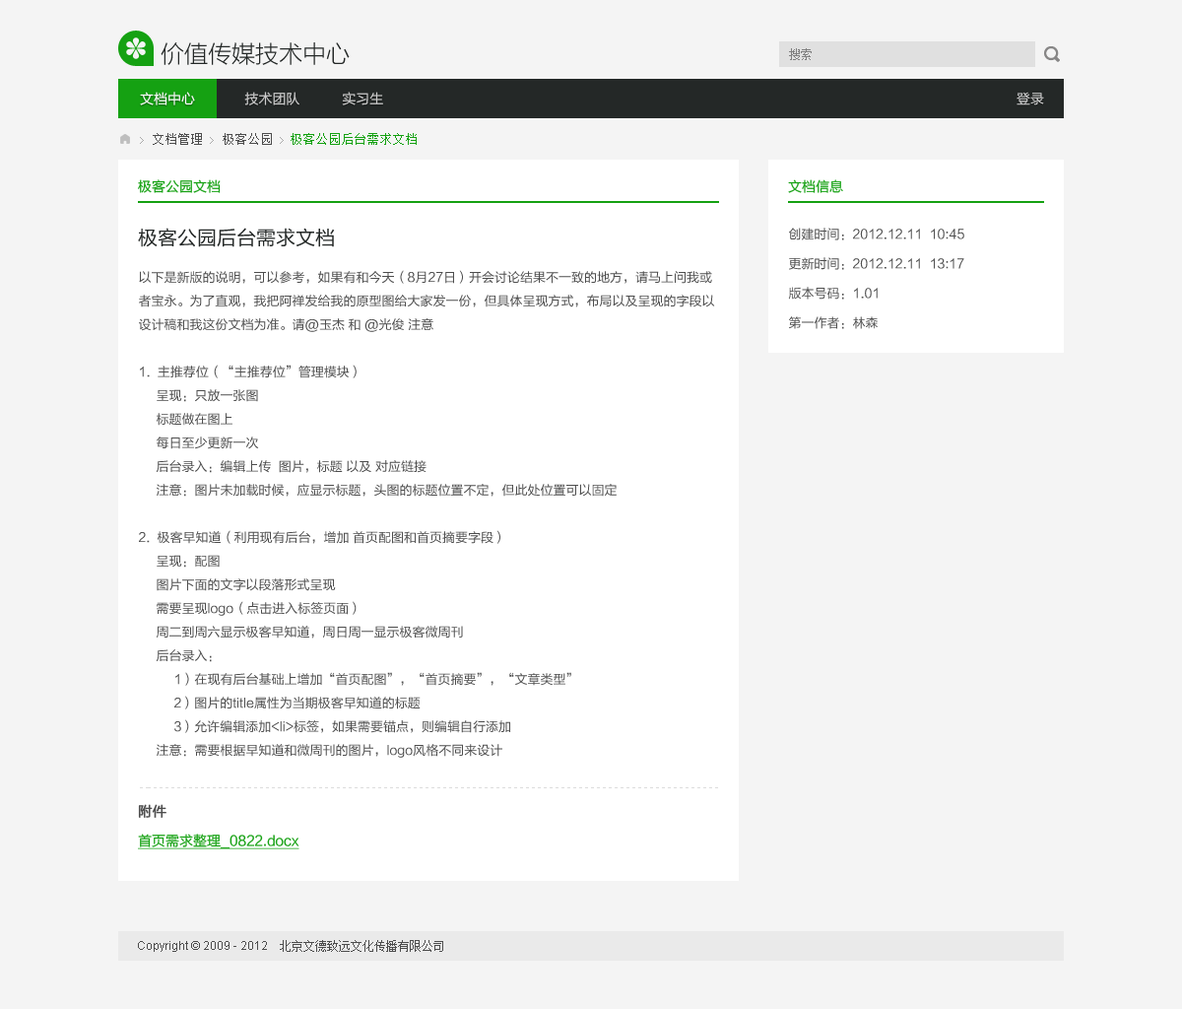
<style>
.page{position:relative;width:1182px;height:1009px;background:#f4f4f4}
.page>*{position:absolute;margin:0}
.t1{font:23.6px "FZLTXHK--GBK1-0";color:#242827}
.t2{font:11.8px "SimSun";color:#7f7f7f}
.t3{font:13.8px "FZLTHJW--GB1-0";color:#cccccc}
.t4{font:13.8px "FZLTHJW--GB1-0";color:#ffffff}
.t5{font:13.8px "FZLTHJW--GB1-0";color:#dddddd}
.t6{font:12.8px "SimSun";color:#15a112}
.t7{font:12.8px "SimSun";color:#4d4d4d}
.t8{font:9.9px "SimSun";color:#aaaaaa}
.t9{font:13.8px "FZLTHJW--GB1-0";color:#15a112}
.t10{font:19.7px "FZLTHJW--GB1-0";color:#242827}
.t11{font:12.8px/29.6px "FZLTHJW--GB1-0";color:#4d4d4d}
.t12{font:12.8px/23.6px "FZLTHJW--GB1-0";color:#4d4d4d}
.t13{font:13.8px/29.6px "FZLTHJW--GB1-0";color:#15a112;text-decoration:underline}
.t14{font:13.8px/29.6px "FZLTHJW--GB1-0";color:#4d4d4d;font-weight:bold}
.t15{font:11.8px "ArialMT";color:#4d4d4d}
.t16{font:11.8px "SimSun";color:#4d4d4d}
</style>
<div class="page">
<p class="t1" style="left:161px;top:42px;width:189px;height:23px">价值传媒技术中心</p>
<p class="t2" style="left:789px;top:48px;width:23px;height:12px">搜索</p>
<p class="t3" style="left:140px;top:92px;width:243px;height:13px"><span class="t4">文档中心             </span>技术团队           实习生</p>
<p class="t5" style="left:1017px;top:92px;width:27px;height:13px">登录</p>
<p class="t6" style="left:140px;top:133px;width:277px;height:12px"><span class="t7"> </span><span class="t8">&gt;</span><span class="t7"> 文档管理 </span><span class="t8">&gt;</span><span class="t7"> 极客公园 </span><span class="t8">&gt; </span>极客公园后台需求文档</p>
<p class="t9" style="left:138px;top:179px;width:83px;height:14px">极客公园文档</p>
<p class="t9" style="left:788px;top:179px;width:55px;height:14px">文档信息</p>
<p class="t10" style="left:138px;top:228px;width:197px;height:19px">极客公园后台需求文档</p>
<p class="t11" style="left:788px;top:228px;width:176px;height:101px">创建时间：2012.12.11  10:45<br>更新时间：2012.12.11  13:17<br>版本号码：1.01<br>第一作者：林森</p>
<p class="t12" style="left:139px;top:270px;width:576px;height:488px">以下是新版的说明，可以参考，如果有和今天（8月27日）开会讨论结果不一致的地方，请马上问我或者宝永。为了直观，我把阿禅发给我的原型图给大家发一份，但具体呈现方式，布局以及呈现的字段以设计稿和我这份文档为准。请@玉杰 和 @光俊 注意<br><br>1.  主推荐位（“主推荐位”管理模块）<br>     呈现：只放一张图<br>     标题做在图上<br>     每日至少更新一次<br>     后台录入：编辑上传  图片，标题 以及 对应链接<br>     注意：图片未加载时候，应显示标题，头图的标题位置不定，但此处位置可以固定<br> <br>2.  极客早知道（利用现有后台，增加 首页配图和首页摘要字段）<br>     呈现：配图<br>     图片下面的文字以段落形式呈现<br>     需要呈现logo（点击进入标签页面）<br>     周二到周六显示极客早知道，周日周一显示极客微周刊<br>     后台录入：<br> 1）在现有后台基础上增加“首页配图”，“首页摘要”，“文章类型”<br> 2）图片的title属性为当期极客早知道的标题<br> 3）允许编辑添加&lt;li&gt;标签，如果需要锚点，则编辑自行添加<br>     注意：需要根据早知道和微周刊的图片，logo风格不同来设计<br> <br>3.       中期推荐位（“中期推荐”管理模块）<br>呈现：1）共12个，每次显示4个，该区域内容和主推荐区无关<br>2）编辑能控制顺序，更新频率不定<br>3）每次点击，更换四个（不点击就不更换），到最后一张图片不能继续往后点<br>后台录入：编辑上传图片，标题（作为图片的title值）以及链接，并通过拖拽调整顺序<br> <br>4.       极客观察（利用现有后台）<br>呈现：1）“极客观察”旁边用一句话描述产品定位<br>2）每篇文章均显示标题，作者，日期，最新2-4篇文章加摘要，共6-10个（以设计稿为准），不读极客早知道和微周刊<br>后台录入：不需专门管理模块，和后台录入同步更新<br> <br>5.       极客广播（“极客广播”管理模块）<br>呈现：1）“极客广播”旁边用一句话描述产品定位<br>2）每个广播显示配图（新尺寸），标题，演讲人，头衔，所属活动，视频数固定（以设计稿为准）<br>后台录入：1）后台添加并拖拽排序<br>2）点击确认后才发布到首页<br> <br>6.    极客活动（“极客活动”管理模块）<br>呈现：1）不作为单独栏目，和“极客广播”作为一个整体<br>      2）以列表（活动标题加活动日期）形式呈现<br>后台录入：1）编辑添加活动id<br>          2）通过拖拽排序<br> <br>7.    热门推荐（“热门推荐”管理模块，包括广播和观察）<br>呈现：观察和广播分开呈现，不配图，只有标题<br>后台录入：编辑添加，拖拽排序<br> <br>8.    注册推广（“注册推广”管理模块）<br>后台录入：支持html，多数时候编辑只填充图片和链接，但是有可能填充第三方插件<br>          登陆后，该区域隐藏，下方内容自动补齐<br>          提供预览功能，确认保存后再发布到首页<br> <br>9.    广告推广位（“广告推广”管理模块）<br>呈现：有广告时为广告位<br>无广告时，随机显示一篇文章或一个视频的标题（设计感强），每次点击按钮，切换下一个（目的是勾沉），读取微博分享的图<br>后台录入：需要编辑选择该位置显示广告还是随机<br> <br>10.   导航：保持和内页统一</p>
<p class="t13" style="left:138px;top:804px;width:161px;height:45px"><span class="t14">附件<br></span>首页需求整理_0822.docx</p>
<p class="t15" style="left:138px;top:940px;width:305px;height:12px">Copyright © 2009 - 2012    <span class="t16">北京文德致远文化传播有限公司</span></p>
</div>
